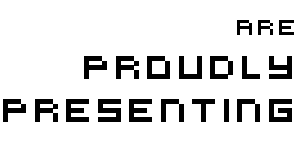
<style>
.page{position:relative;width:300px;height:150px;background:#ffffff}
.page>*{position:absolute;margin:0}
.t1{font:36px/14.5px "VirtualDJ";color:#000000}
.t2{font:24px/14.5px "VirtualDJ";color:#000000}
</style>
<div class="page">
<p class="t1" style="left:3px;top:20px;width:291px;height:102px;text-align:right"><span class="t2">Are<br></span><br><br>proudly<br><br><br>presenting</p>
</div>
